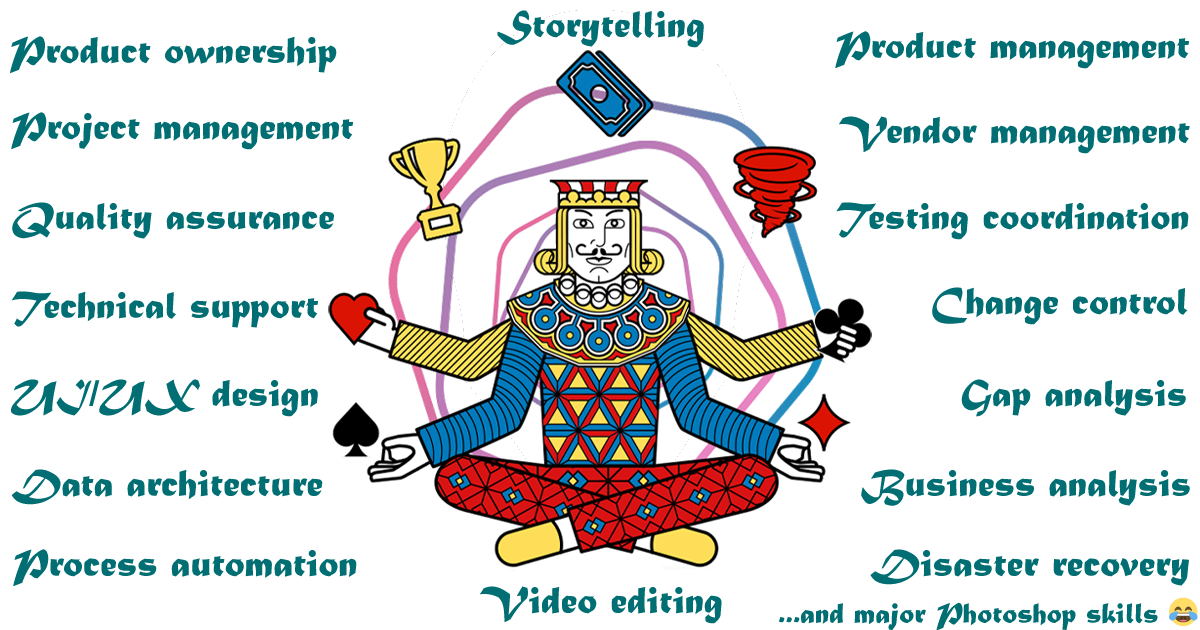
<style>
.page{position:relative;width:1200px;height:630px;background:#ffffff}
.page>*{position:absolute;margin:0}
.t1{font:40px "MaturaMTScriptCapitals";color:#006e72}
.t2{font:30px "MaturaMTScriptCapitals";color:#006e72}
.t3{font:30px "EmojiOneColor";color:#006e72}
</style>
<div class="page">
<p class="t1" style="left:497px;top:10px;width:207px;height:38px">Storytelling</p>
<p class="t1" style="left:10px;top:36px;width:327px;height:38px">Product ownership</p>
<p class="t1" style="left:835px;top:31px;width:355px;height:38px">Product management</p>
<p class="t1" style="left:11px;top:112px;width:343px;height:38px">Project management</p>
<p class="t1" style="left:839px;top:116px;width:351px;height:38px">Vendor management</p>
<p class="t1" style="left:12px;top:202px;width:322px;height:37px">Quality assurance</p>
<p class="t1" style="left:836px;top:202px;width:353px;height:38px">Testing coordination</p>
<p class="t1" style="left:11px;top:291px;width:308px;height:37px">Technical support</p>
<p class="t1" style="left:932px;top:287px;width:256px;height:38px">Change control</p>
<p class="t1" style="left:11px;top:379px;width:307px;height:38px">UI/UX design</p>
<p class="t1" style="left:961px;top:379px;width:225px;height:38px">Gap analysis</p>
<p class="t1" style="left:11px;top:469px;width:312px;height:36px">Data architecture</p>
<p class="t1" style="left:861px;top:469px;width:329px;height:37px">Business analysis</p>
<p class="t1" style="left:13px;top:549px;width:344px;height:38px">Process automation</p>
<p class="t1" style="left:870px;top:549px;width:319px;height:37px">Disaster recovery</p>
<p class="t1" style="left:480px;top:586px;width:242px;height:38px">Video editing</p>
<p class="t2" style="left:778px;top:597px;width:420px;height:34px">...and major Photoshop skills <span class="t3">😂</span></p>
</div>
